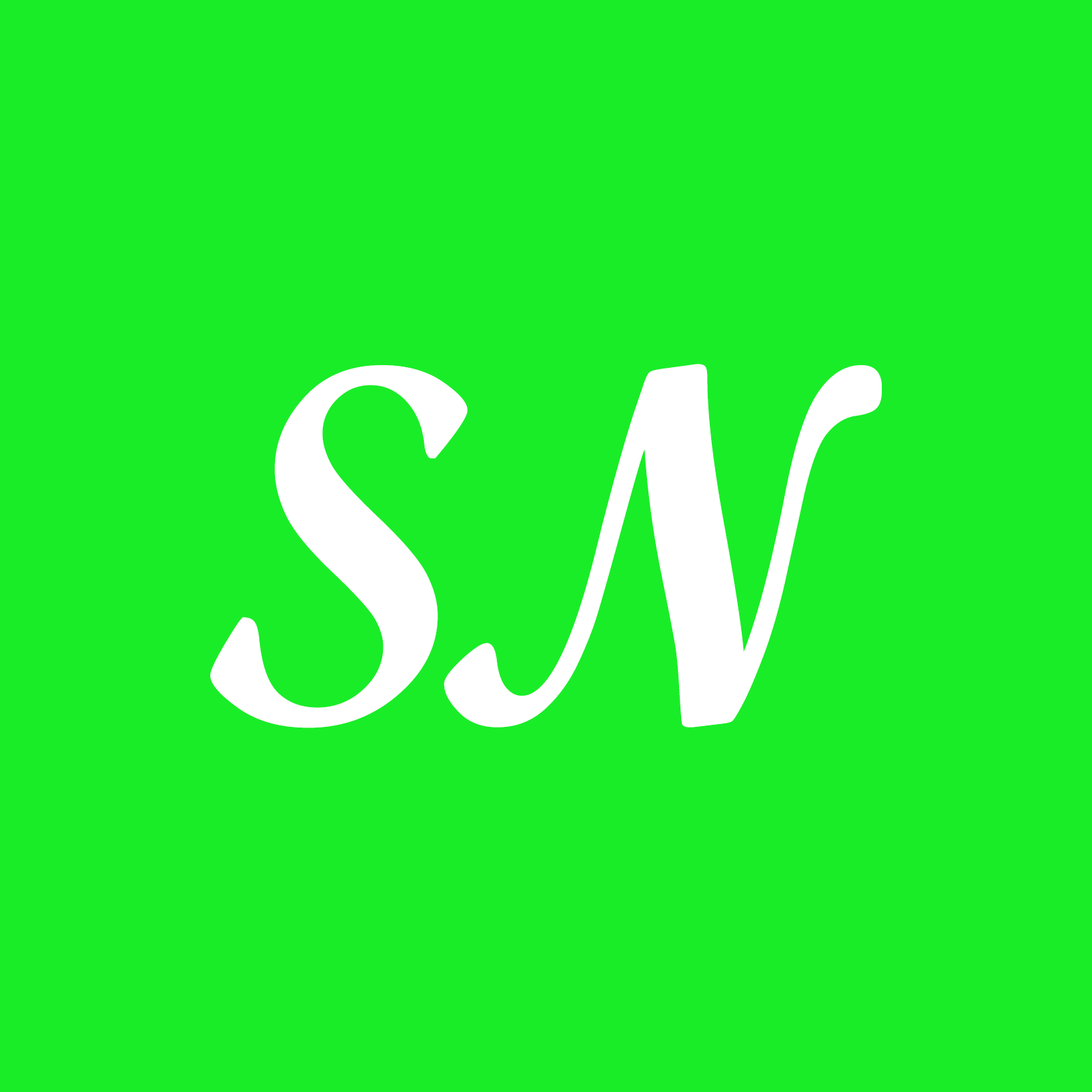
<style>
.page{position:relative;width:1092px;height:1092px;background:#19ed28}
.page>*{position:absolute;margin:0}
.t1{font:511.9px "ScriptMTBold";letter-spacing:-0.12em;color:#ffffff}
</style>
<div class="page">
<p class="t1" style="left:210px;top:364px;width:672px;height:364px">SN</p>
</div>
